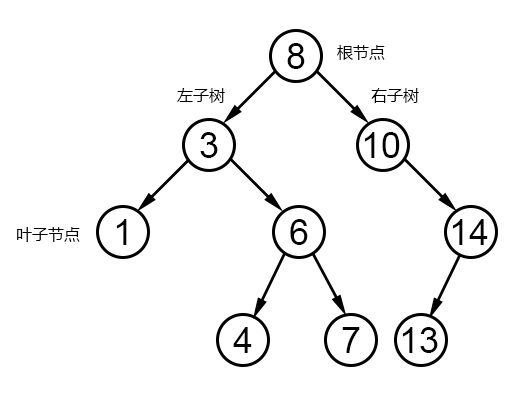
<style>
.page{position:relative;width:520px;height:400px;background:#ffffff}
.page>*{position:absolute;margin:0}
.t1{font:36px "ArialMT";color:#000000}
.t2{font:16px "MicrosoftYaHeiUI";color:#000000}
</style>
<div class="page">
<p class="t1" style="left:287px;top:43px;width:18px;height:26px">8</p>
<p class="t2" style="left:337px;top:45px;width:48px;height:15px">根节点</p>
<p class="t2" style="left:177px;top:88px;width:48px;height:15px">左子树</p>
<p class="t2" style="left:371px;top:88px;width:48px;height:15px">右子树</p>
<p class="t1" style="left:200px;top:132px;width:18px;height:26px">3</p>
<p class="t1" style="left:364px;top:132px;width:36px;height:26px">10</p>
<p class="t1" style="left:116px;top:219px;width:11px;height:26px">1</p>
<p class="t1" style="left:290px;top:219px;width:18px;height:26px">6</p>
<p class="t1" style="left:452px;top:219px;width:36px;height:26px">14</p>
<p class="t2" style="left:17px;top:227px;width:63px;height:15px">叶子节点</p>
<p class="t1" style="left:233px;top:327px;width:19px;height:26px">4</p>
<p class="t1" style="left:342px;top:327px;width:18px;height:26px">7</p>
<p class="t1" style="left:402px;top:327px;width:36px;height:26px">13</p>
</div>
